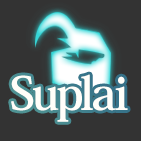
<style>
.page{position:relative;width:141px;height:141px;background:#333333}
.page>*{position:absolute;margin:0}
.t1{font:48px "HeiseiMinStd-W7";letter-spacing:-0.04em;color:#fffef9}
</style>
<div class="page">
<p class="t1" style="left:11px;top:74px;width:117px;height:48px">Suplai</p>
</div>
